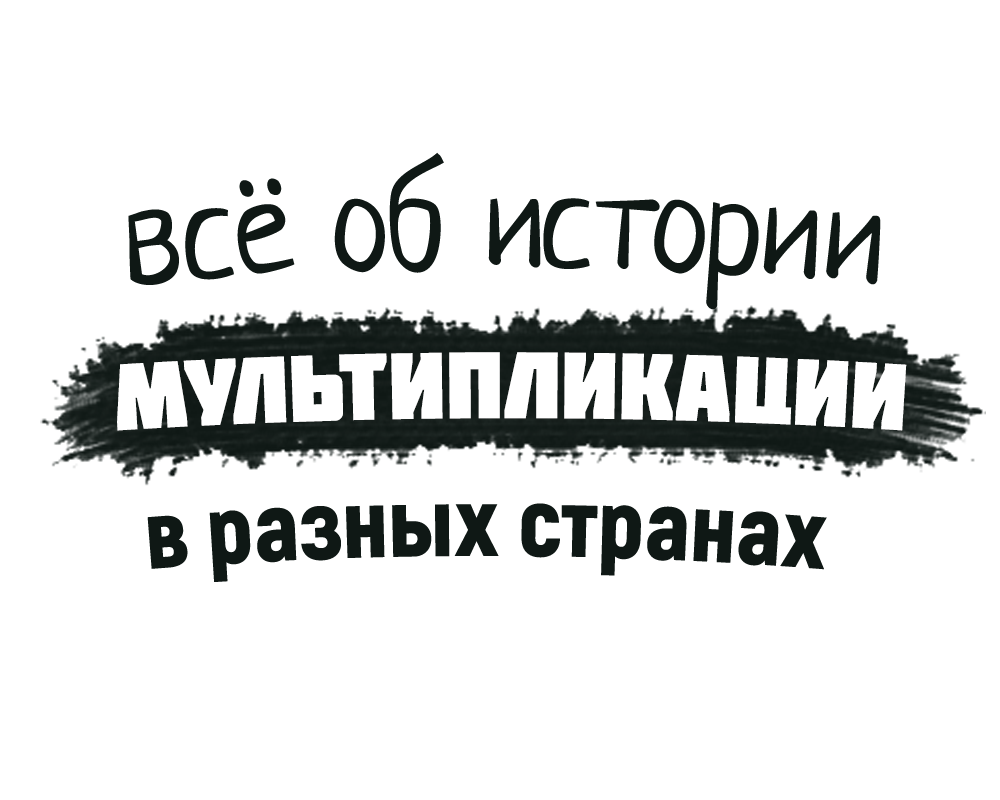
<style>
.page{position:relative;width:1000px;height:800px;background:#ffffff}
.page>*{position:absolute;margin:0}
.t1{font:133.8px "Neucha";letter-spacing:0.005em;color:#000000}
.t2{font:94.7px "Molot";color:#ffffff}
.t3{font:97.8px "Akrobat-Black";color:#000000}
</style>
<div class="page">
<p class="t1" style="left:128px;top:152px;width:753px;height:158px">всё об истории</p>
<p class="t2" style="left:117px;top:352px;width:790px;height:79px">мультипликации</p>
<p class="t3" style="left:147px;top:503px;width:680px;height:79px">в разных странах</p>
</div>
